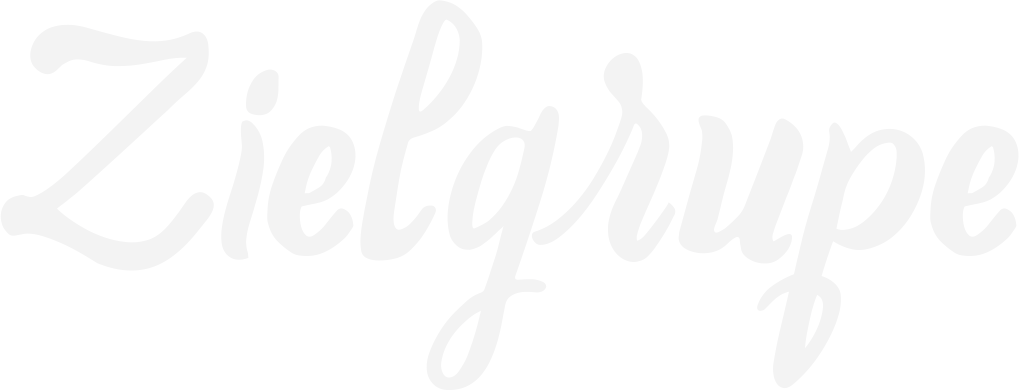
<style>
.page{position:relative;width:1019px;height:390px;background:#ffffff}
.page>*{position:absolute;margin:0}
.t1{font:260px "Cornish";color:#f3f3f3}
</style>
<div class="page">
<p class="t1" style="left:0px;top:0px;width:1019px;height:390px">Zielgrupe</p>
</div>
